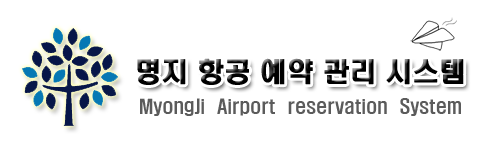
<style>
.page{position:relative;width:493px;height:154px;background:#ffffff}
.page>*{position:absolute;margin:0}
.t1{font:26px "H2hdrM";color:#000000;font-weight:bold}
.t2{font:18px "H2hdrM";color:#5b5b5b}
</style>
<div class="page">
<p class="t1" style="left:137px;top:58px;width:327px;height:27px">명지 항공 예약 관리 시스템</p>
<p class="t2" style="left:140px;top:98px;width:321px;height:18px">MyongJi  Airport  reservation  System</p>
</div>
